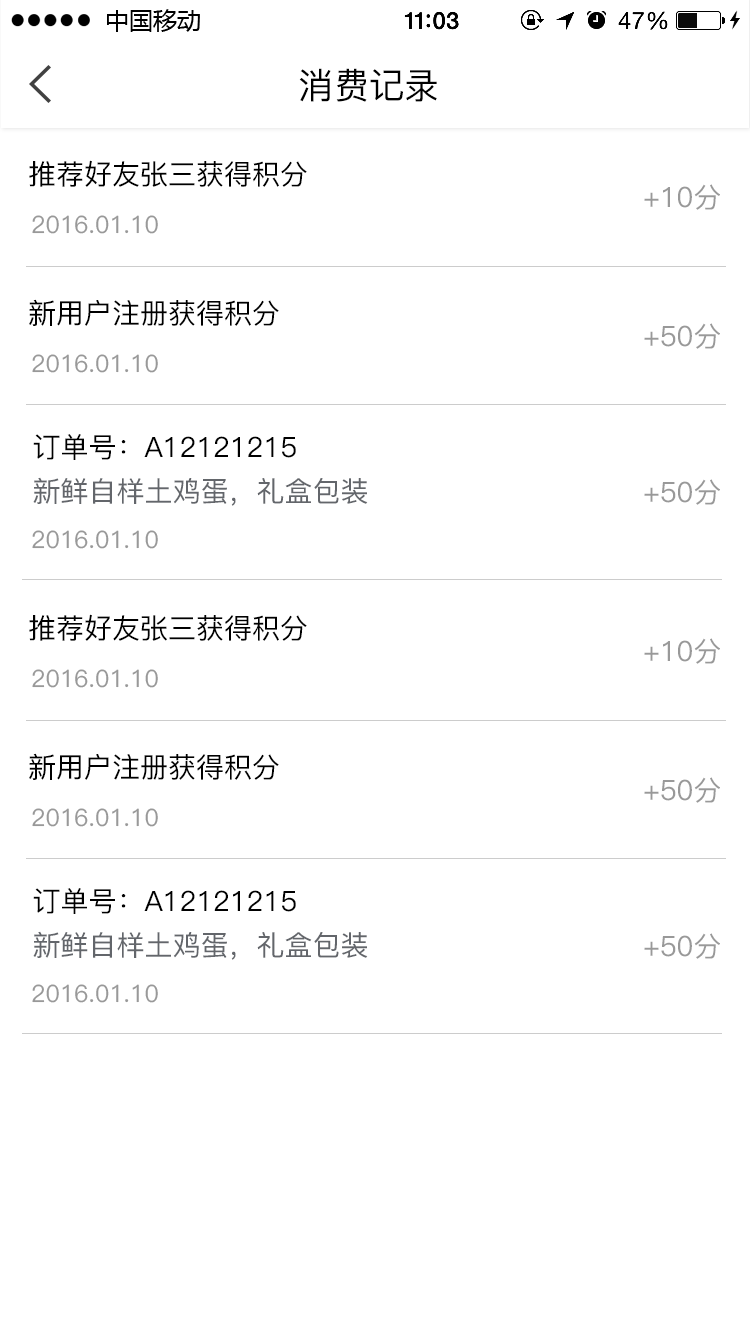
<style>
.page{position:relative;width:750px;height:1334px;background:#ffffff}
.page>*{position:absolute;margin:0}
.t1{font:35.7px "PingFang-SC-Medium";color:#000000}
.t2{font:28px "PingFang-SC-Medium";color:#000000}
.t3{font:28px "PingFang-SC-Medium";color:#999999}
.t4{font:24px "PingFang-SC-Medium";color:#999999}
.t5{font:28px/44px "PingFang-SC-Medium";color:#000000}
.t6{font:28px/44px "PingFang-SC-Medium";color:#63666b}
</style>
<div class="page">
<p class="t1" style="left:299px;top:68px;width:138px;height:34px">消费记录</p>
<p class="t2" style="left:29px;top:160px;width:278px;height:27px">推荐好友张三获得积分</p>
<p class="t3" style="left:644px;top:184px;width:76px;height:26px">+10分</p>
<p class="t4" style="left:32px;top:215px;width:126px;height:19px">2016.01.10</p>
<p class="t2" style="left:29px;top:299px;width:250px;height:27px">新用户注册获得积分</p>
<p class="t3" style="left:644px;top:323px;width:76px;height:26px">+50分</p>
<p class="t4" style="left:32px;top:354px;width:126px;height:19px">2016.01.10</p>
<p class="t5" style="left:33px;top:434px;width:335px;height:72px">订单号：A12121215<br><span class="t6">新鲜自样土鸡蛋，礼盒包装</span></p>
<p class="t3" style="left:644px;top:479px;width:76px;height:26px">+50分</p>
<p class="t4" style="left:32px;top:530px;width:126px;height:19px">2016.01.10</p>
<p class="t2" style="left:29px;top:614px;width:278px;height:27px">推荐好友张三获得积分</p>
<p class="t3" style="left:644px;top:638px;width:76px;height:26px">+10分</p>
<p class="t4" style="left:32px;top:669px;width:126px;height:19px">2016.01.10</p>
<p class="t2" style="left:29px;top:753px;width:250px;height:27px">新用户注册获得积分</p>
<p class="t3" style="left:644px;top:777px;width:76px;height:26px">+50分</p>
<p class="t4" style="left:32px;top:808px;width:126px;height:19px">2016.01.10</p>
<p class="t5" style="left:33px;top:888px;width:335px;height:72px">订单号：A12121215<br><span class="t6">新鲜自样土鸡蛋，礼盒包装</span></p>
<p class="t3" style="left:644px;top:933px;width:76px;height:26px">+50分</p>
<p class="t4" style="left:32px;top:984px;width:126px;height:19px">2016.01.10</p>
</div>
